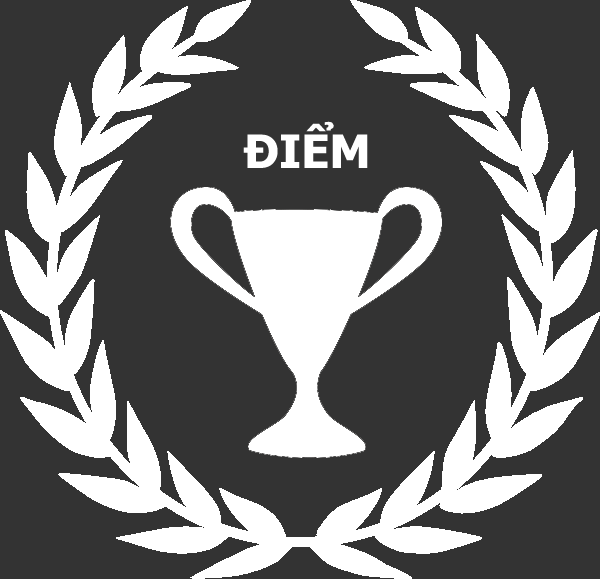
<style>
.page{position:relative;width:600px;height:579px;background:#333333}
.page>*{position:absolute;margin:0}
.t1{font:46px "Tahoma-Bold";color:#ffffff}
</style>
<div class="page">
<p class="t1" style="left:243px;top:121px;width:125px;height:47px">ĐIỂM</p>
</div>
